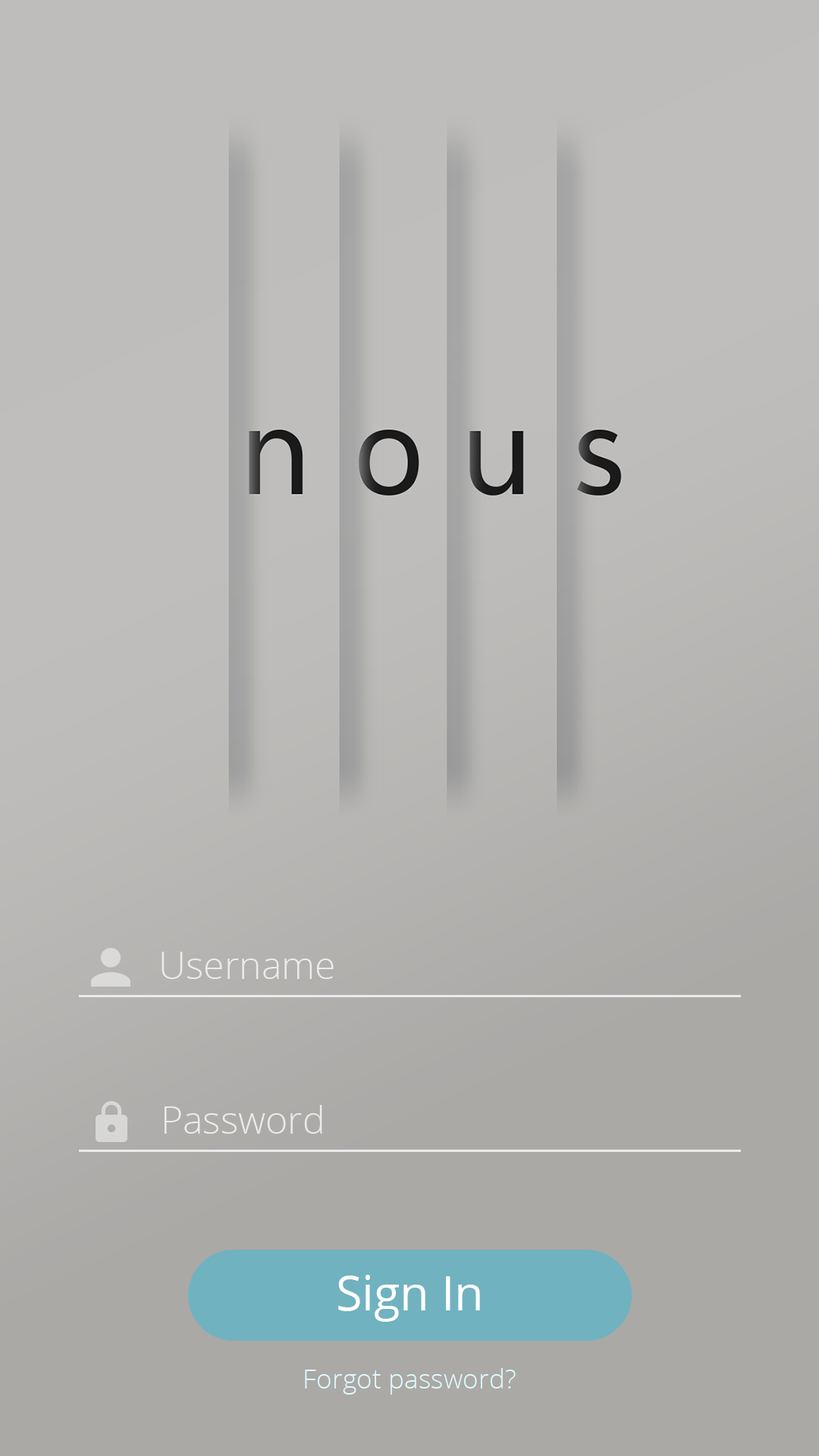
<style>
.page{position:relative;width:819px;height:1456px}
.page>*{position:absolute;margin:0}
.t1{font:37.9px "OpenSans-Light";color:#ebebeb}
.t2{font:47.4px "OpenSans";color:#ffffff}
.t3{font:26.9px "OpenSans-Light";color:#def9ff}
</style>
<div class="page">
<p class="t1" style="left:162px;top:952px;width:172px;height:27px">Username</p>
<p class="t1" style="left:165px;top:1105px;width:157px;height:29px">Password</p>
<p class="t2" style="left:338px;top:1275px;width:142px;height:47px">Sign In</p>
<p class="t3" style="left:305px;top:1368px;width:211px;height:27px">Forgot password?</p>
</div>
